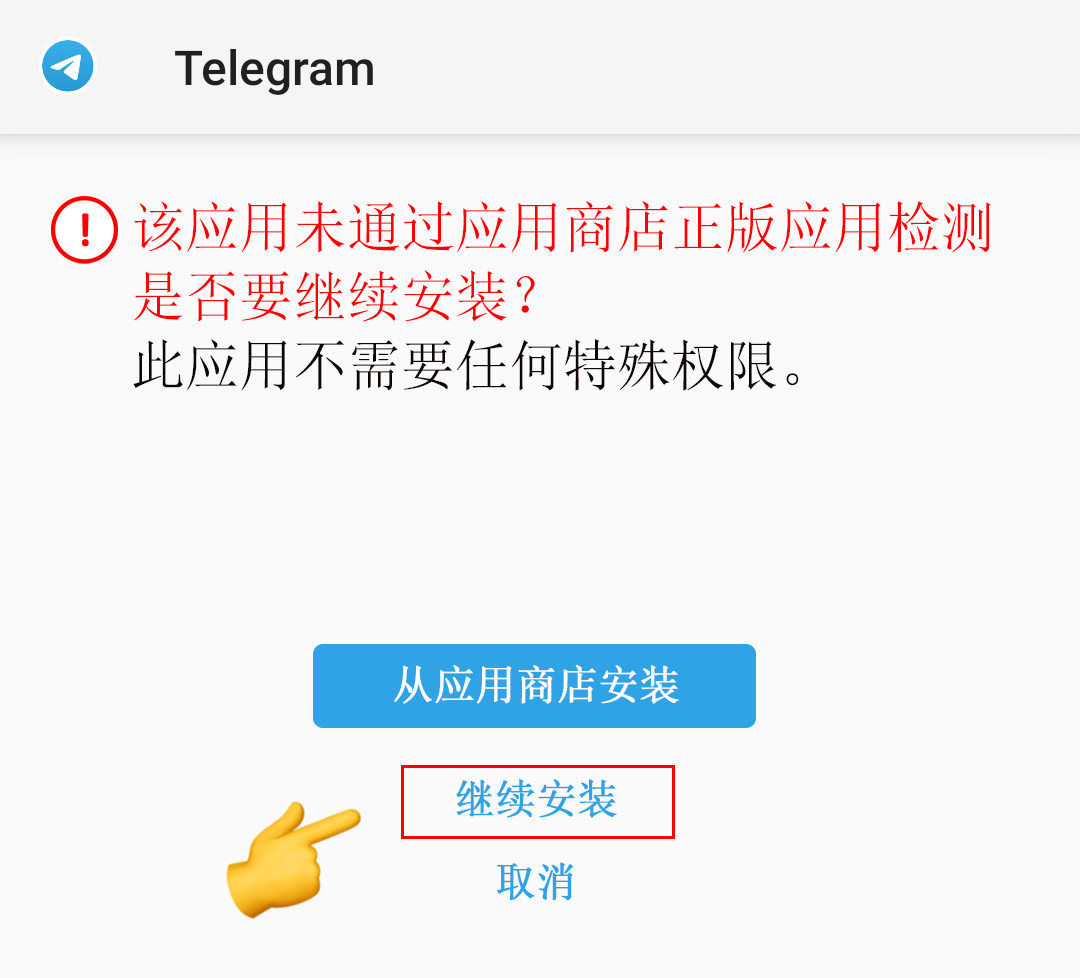
<style>
.page{position:relative;width:1080px;height:978px;background:#fafafa}
.page>*{position:absolute;margin:0}
.t1{font:55.6px/69px "SimSun";color:#ff0000}
.t2{font:55.6px/69px "SimSun";color:#0e0606}
.t3{font:41.2px "SimSun";color:#ffffff;font-weight:bold}
.t4{font:41.2px "SimSun";color:#30a3e6;font-weight:bold}
</style>
<div class="page">
<p class="t1" style="left:133px;top:201px;width:858px;height:190px">该应用未通过应用商店正版应用检测 <br>是否要继续安装？<br><span class="t2">此应用不需要任何特殊权限。</span></p>
<p class="t3" style="left:394px;top:665px;width:285px;height:39px">从应用商店安装</p>
<p class="t4" style="left:456px;top:779px;width:161px;height:39px">继续安装</p>
<p class="t4" style="left:497px;top:862px;width:77px;height:39px">取消</p>
</div>
